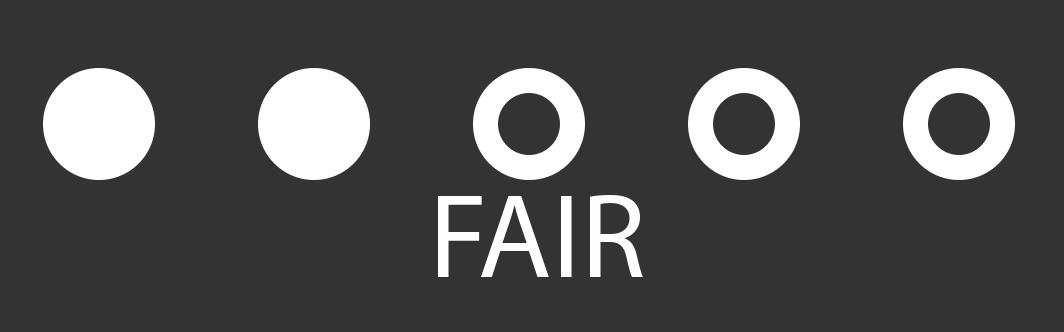
<style>
.page{position:relative;width:1064px;height:332px;background:#333333}
.page>*{position:absolute;margin:0}
.t1{font:120.1px "MyriadPro-Regular";color:#fefefe}
</style>
<div class="page">
<p class="t1" style="left:438px;top:195px;width:205px;height:82px">FAIR</p>
</div>
